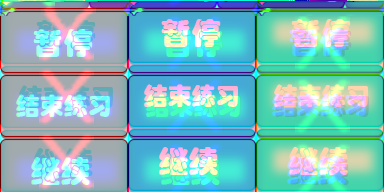
<style>
.page{position:relative;width:384px;height:192px}
.page>*{position:absolute;margin:0}
.t1{font:30px "STHupo"}
.t2{font:24px "STHupo"}
</style>
<div class="page">
<p class="t1" style="left:163px;top:18px;width:60px;height:28px">暂停</p>
<p class="t1" style="left:292px;top:18px;width:60px;height:28px">暂停</p>
<p class="t2" style="left:146px;top:83px;width:94px;height:23px">结束练习</p>
<p class="t2" style="left:275px;top:83px;width:94px;height:23px">结束练习</p>
<p class="t1" style="left:290px;top:146px;width:59px;height:28px">继续</p>
</div>
